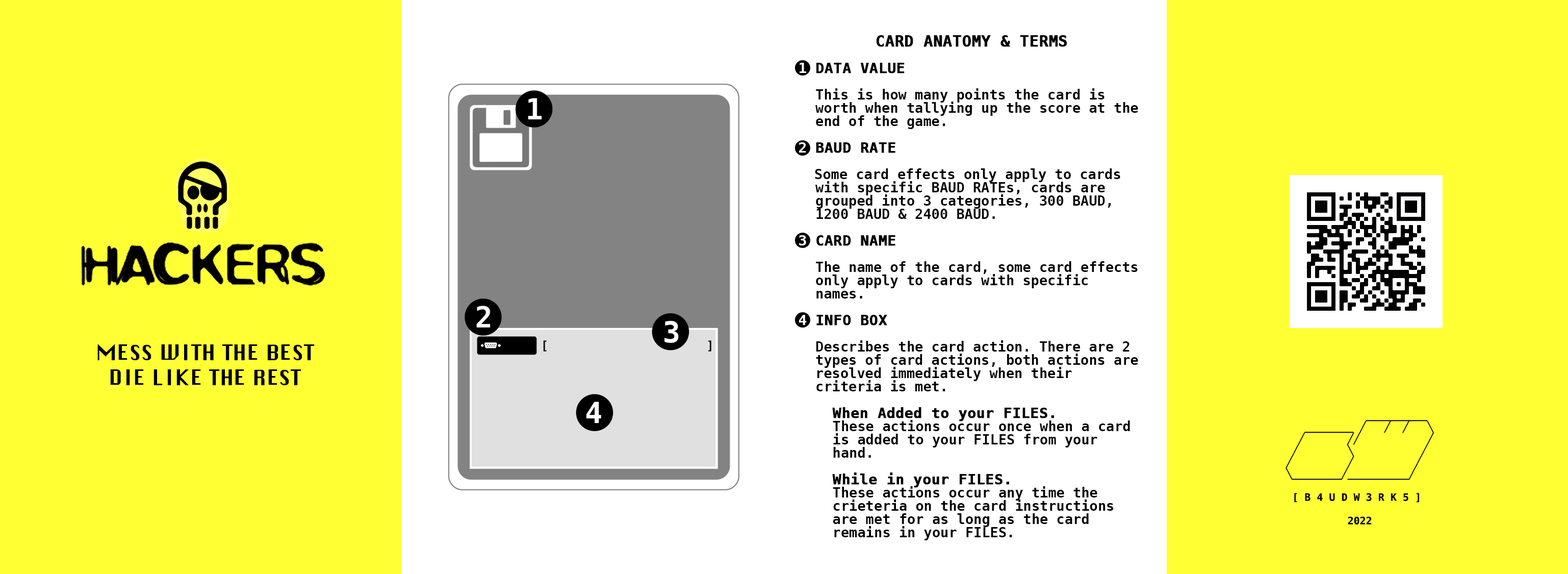
<style>
.page{position:relative;width:1568px;height:574px;background:#ffff33}
.page>*{position:absolute;margin:0}
.t1{font:13.8px/13.3px "DejaVuSansMono-Bold";color:#000000}
.t2{font:15.3px/13.3px "DejaVuSansMono-Bold";color:#000000;font-weight:bold}
.t3{font:14.3px/13.3px "DejaVuSansMono-Bold";color:#ffffff}
.t4{font:14.3px/13.3px "DejaVuSansMono-Bold";color:#000000;font-weight:bold}
.t5{font:10.2px/11.7px "DejaVuSansMono-Bold";color:#000000}
</style>
<div class="page">
<p class="t1" style="left:799px;top:35px;width:339px;height:505px;text-align:center"><span class="t2">CARD ANATOMY &amp; TERMS<br><br> </span><span class="t3">1 </span><span class="t4">DATA VALUE<br><br>   </span>This is how many points the card is <br>   worth when tallying up the score at the <br>   end of the game.<br><br> <span class="t3">2 </span><span class="t4">BAUD RATE<br><br></span>   Some card effects only apply to cards <br>   with specific BAUD RATEs, cards are <br>   grouped into 3 categories, 300 BAUD, <br>   1200 BAUD &amp; 2400 BAUD.<br><br> <span class="t3">3 </span><span class="t4">CARD NAME<br><br>   </span>The name of the card, some card effects <br>   only apply to cards with specific <br>   names.<br><br> <span class="t3">4 </span><span class="t4">INFO BOX<br><br>   </span>Describes the card action. There are 2 <br>   types of card actions, both actions are <br>   resolved immediately when their <br>   criteria is met.<br><br>     <span class="t4">When Added to your FILES.<br>     </span>These actions occur once when a card <br>     is added to your FILES from your <br>     hand.<br><br>     <span class="t4">While in your FILES.<br>     </span>These actions occur any time the <br>     crieteria on the card instructions <br>     are met for as long as the card <br>     remains in your FILES.</p>
<p class="t5" style="left:1286px;top:420px;width:148px;height:104px">__________<br>   ________ ╱   ╱  ╱   ╲<br>  ╱       ╱╱           ╱<br> ╱        ╲           ╱<br>╱         ╱          ╱<br>╲________╱__________╱<br><br> [ B 4 U D W 3 R K 5 ]<br><br>          2022</p>
</div>
